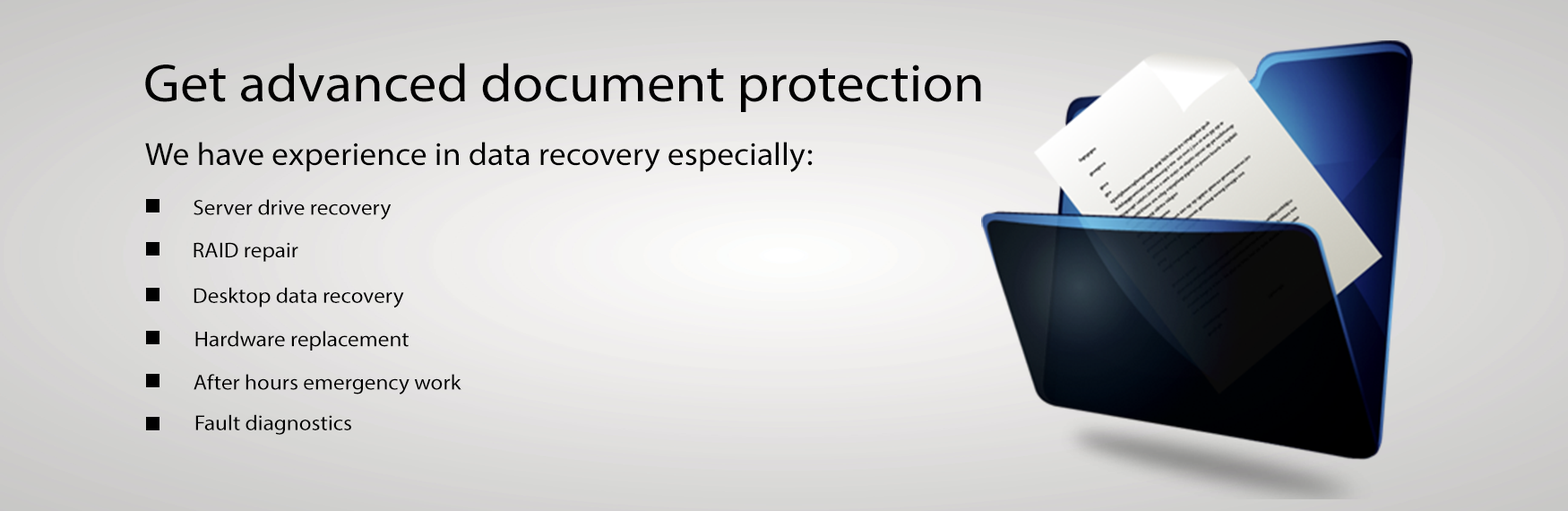
<style>
.page{position:relative;width:1568px;height:511px}
.page>*{position:absolute;margin:0}
.t1{font:53.8px "MyriadPro-Regular";color:#000000;scale:1.05 1}
.t2{font:32.3px "MyriadPro-Regular";color:#000000;scale:1.05 1}
.t3{font:21.5px "MyriadPro-Regular";color:#000000;scale:1.05 1}
</style>
<div class="page">
<p class="t1" style="left:145px;top:63px;width:836px;height:49px">Get advanced document protection</p>
<p class="t2" style="left:145px;top:142px;width:668px;height:30px">We have experience in data recovery especially:</p>
<p class="t3" style="left:194px;top:199px;width:198px;height:21px">Server drive recovery</p>
<p class="t3" style="left:194px;top:242px;width:104px;height:20px">RAID repair</p>
<p class="t3" style="left:194px;top:287px;width:210px;height:21px">Desktop data recovery</p>
<p class="t3" style="left:195px;top:331px;width:214px;height:19px">Hardware replacement</p>
<p class="t3" style="left:194px;top:374px;width:267px;height:20px">After hours emergency work</p>
<p class="t3" style="left:195px;top:414px;width:156px;height:21px">Fault diagnostics</p>
</div>
